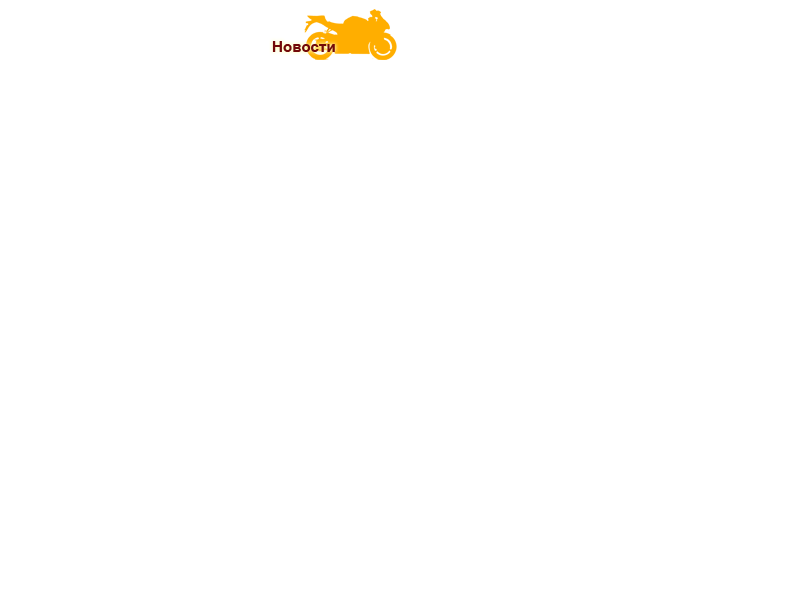
<style>
.page{position:relative;width:800px;height:600px;background:#ffffff}
.page>*{position:absolute;margin:0}
.t1{font:15.2px "Arial-BoldMT";color:#720909}
</style>
<div class="page">
<p class="t1" style="left:272px;top:41px;width:63px;height:11px">Новости</p>
</div>
